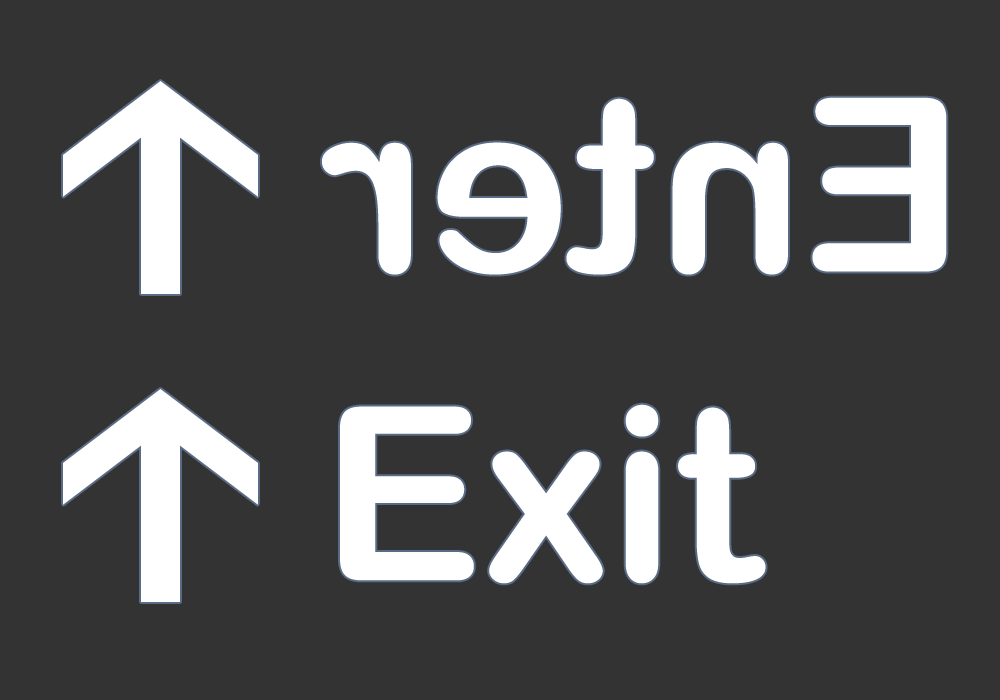
<style>
.page{position:relative;width:1000px;height:700px;background:#333333}
.page>*{position:absolute;margin:0}
.t1{font:242.4px "ArialRoundedMTBold";color:#ffffff}
</style>
<div class="page">
<p class="t1" style="left:322px;top:97px;width:625px;height:178px;rotate:180deg">Enter</p>
<p class="t1" style="left:340px;top:404px;width:426px;height:180px">Exit</p>
</div>
